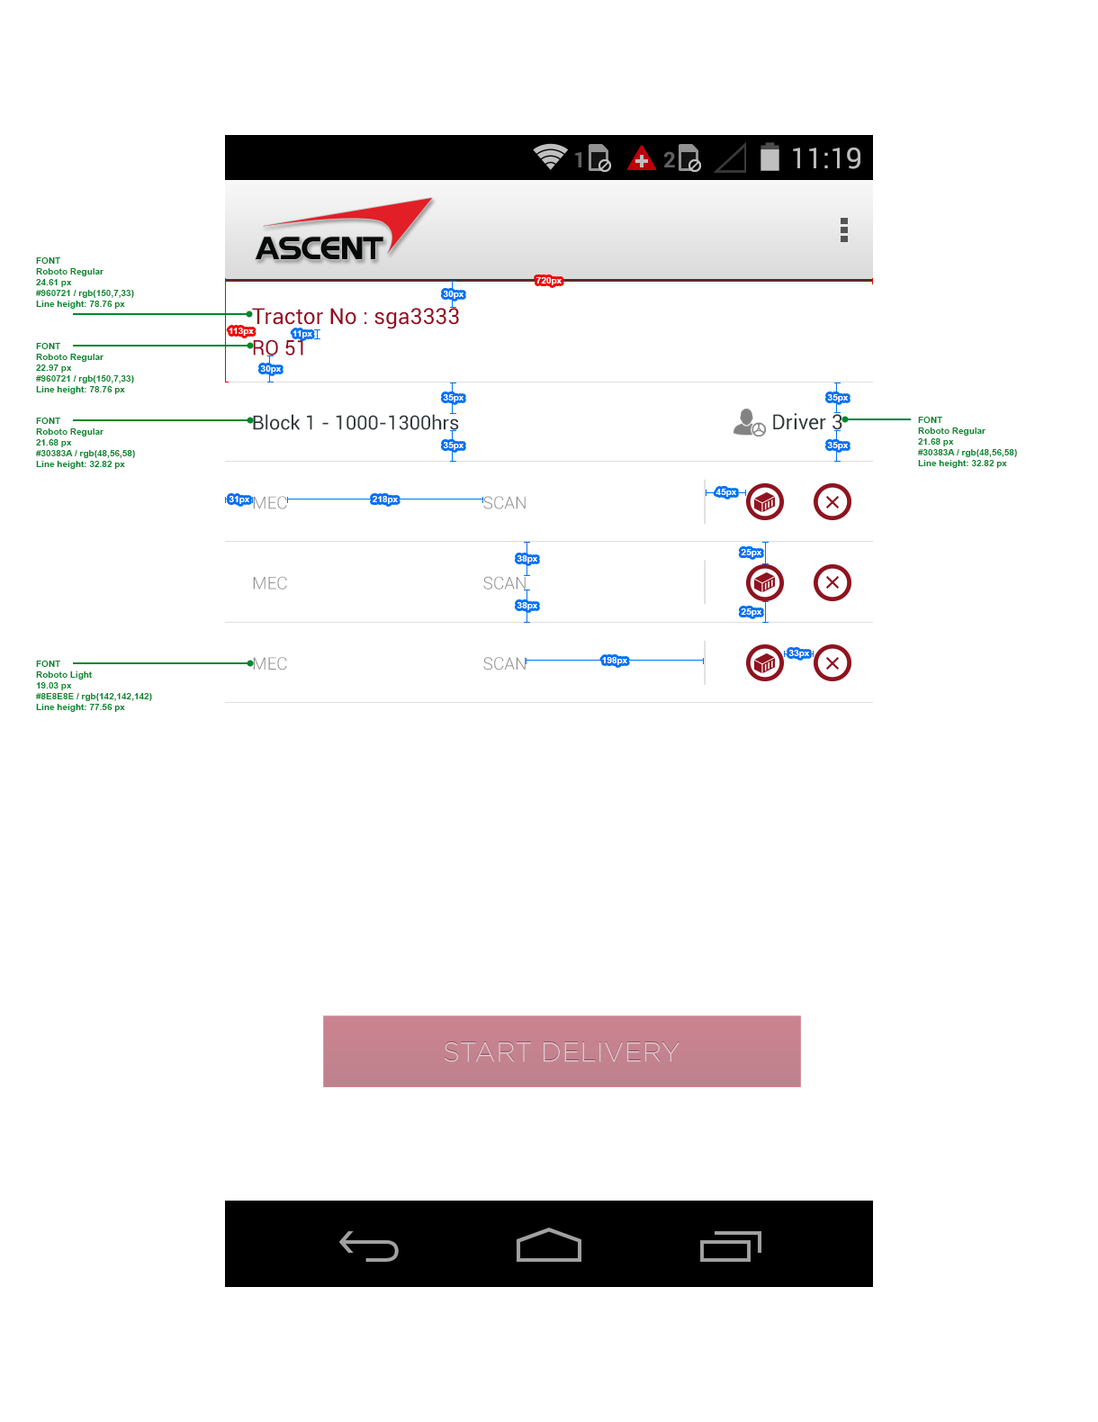
<style>
.page{position:relative;width:1098px;height:1422px;background:#ffffff}
.page>*{position:absolute;margin:0}
.t1{font:9px "Arial-BoldMT";color:#00872b}
.t2{font:9px "Arial-BoldMT";color:#ffffff}
.t3{font:22.2px "Roboto-Regular";color:#960721}
.t4{font:20.7px "Roboto-Regular";color:#960721}
.t5{font:19.5px "Roboto-Regular";color:#30383a}
.t6{font:20.7px "Roboto-Regular";color:#30383a}
.t7{font:17.1px "Roboto-Light";color:#8e8e8e}
.t8{font:27.2px "Gotham-Light";color:#e3c7cc}
</style>
<div class="page">
<p class="t1" style="left:36px;top:257px;width:98px;height:52px">FONT <br>Roboto Regular<br>24.61 px<br>#960721 / rgb(150,7,33)<br>Line height: 78.76 px</p>
<p class="t2" style="left:536px;top:277px;width:26px;height:8px">720px</p>
<p class="t2" style="left:443px;top:291px;width:21px;height:8px">30px</p>
<p class="t3" style="left:252px;top:308px;width:207px;height:21px">Tractor No : sga3333</p>
<p class="t2" style="left:229px;top:328px;width:25px;height:8px">113px</p>
<p class="t4" style="left:253px;top:339px;width:50px;height:17px">RO 51</p>
<p class="t2" style="left:292px;top:330px;width:20px;height:8px">11px</p>
<p class="t1" style="left:36px;top:343px;width:98px;height:51px">FONT <br>Roboto Regular<br>22.97 px<br>#960721 / rgb(150,7,33)<br>Line height: 78.76 px</p>
<p class="t2" style="left:260px;top:365px;width:21px;height:9px">30px</p>
<p class="t2" style="left:443px;top:394px;width:21px;height:8px">35px</p>
<p class="t2" style="left:827px;top:394px;width:21px;height:8px">35px</p>
<p class="t5" style="left:253px;top:414px;width:206px;height:16px">Block 1 - 1000-1300hrs</p>
<p class="t6" style="left:773px;top:413px;width:69px;height:17px">Driver 3</p>
<p class="t1" style="left:36px;top:418px;width:99px;height:51px">FONT <br>Roboto Regular<br>21.68 px<br>#30383A / rgb(48,56,58)<br>Line height: 32.82 px</p>
<p class="t1" style="left:918px;top:417px;width:99px;height:51px">FONT <br>Roboto Regular<br>21.68 px<br>#30383A / rgb(48,56,58)<br>Line height: 32.82 px</p>
<p class="t2" style="left:443px;top:442px;width:21px;height:8px">35px</p>
<p class="t2" style="left:827px;top:442px;width:21px;height:8px">35px</p>
<p class="t2" style="left:229px;top:496px;width:20px;height:8px">31px</p>
<p class="t7" style="left:253px;top:496px;width:34px;height:13px">MEC</p>
<p class="t2" style="left:373px;top:496px;width:25px;height:8px">218px</p>
<p class="t7" style="left:483px;top:496px;width:43px;height:13px">SCAN</p>
<p class="t2" style="left:716px;top:489px;width:20px;height:8px">45px</p>
<p class="t2" style="left:517px;top:555px;width:20px;height:8px">38px</p>
<p class="t2" style="left:741px;top:549px;width:20px;height:8px">25px</p>
<p class="t7" style="left:253px;top:576px;width:34px;height:14px">MEC</p>
<p class="t7" style="left:483px;top:576px;width:43px;height:14px">SCAN</p>
<p class="t2" style="left:517px;top:602px;width:20px;height:8px">38px</p>
<p class="t2" style="left:741px;top:608px;width:20px;height:8px">25px</p>
<p class="t2" style="left:788px;top:650px;width:21px;height:8px">33px</p>
<p class="t1" style="left:36px;top:661px;width:116px;height:51px">FONT <br>Roboto Light<br>19.03 px<br>#8E8E8E / rgb(142,142,142)<br>Line height: 77.56 px</p>
<p class="t7" style="left:253px;top:657px;width:34px;height:13px">MEC</p>
<p class="t7" style="left:483px;top:657px;width:43px;height:13px">SCAN</p>
<p class="t2" style="left:602px;top:657px;width:25px;height:8px">198px</p>
<p class="t8" style="left:444px;top:1042px;width:236px;height:20px">START DELIVERY</p>
</div>
